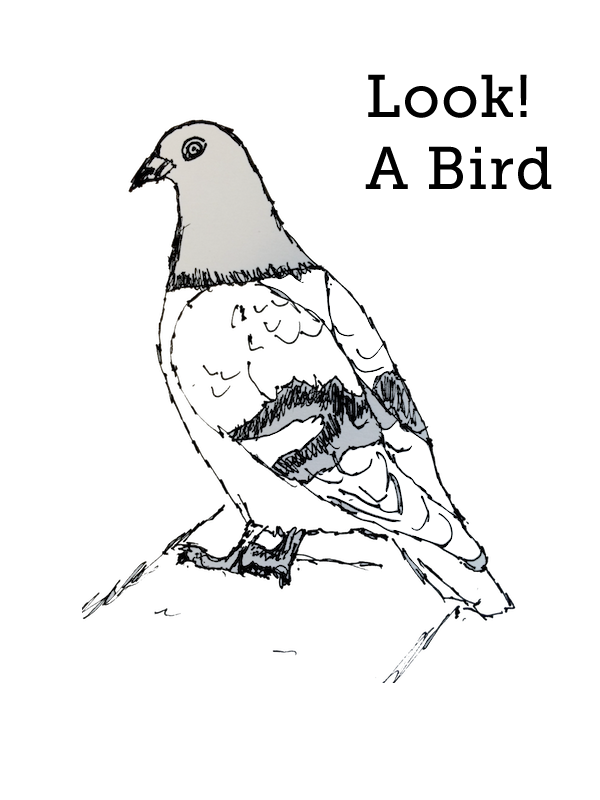
<style>
.page{position:relative;width:600px;height:800px;background:#ffffff}
.page>*{position:absolute;margin:0}
.t1{font:60px "MuseoSlab-500";letter-spacing:0.02em;color:#010101}
</style>
<div class="page">
<p class="t1" style="left:365px;top:74px;width:187px;height:116px">Look!<br>A Bird</p>
</div>
